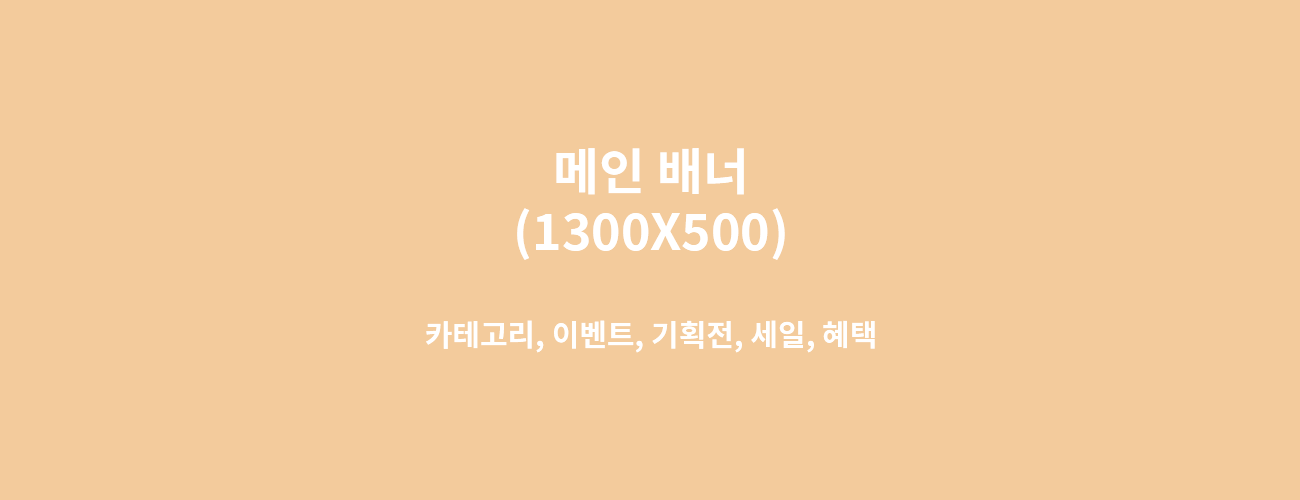
<style>
.page{position:relative;width:1300px;height:500px;background:#f3cb9c}
.page>*{position:absolute;margin:0}
.t1{font:30px "NotoSansKR-Bold";color:#ffffff;text-transform:uppercase}
.t2{font:50px "NotoSansKR-Bold";color:#ffffff;text-transform:uppercase}
</style>
<div class="page">
<p class="t1" style="left:426px;top:148px;width:449px;height:205px;text-align:center"><span class="t2">메인 배너<br>(1300x500)<br><br></span>카테고리, 이벤트, 기획전, 세일, 혜택</p>
</div>
